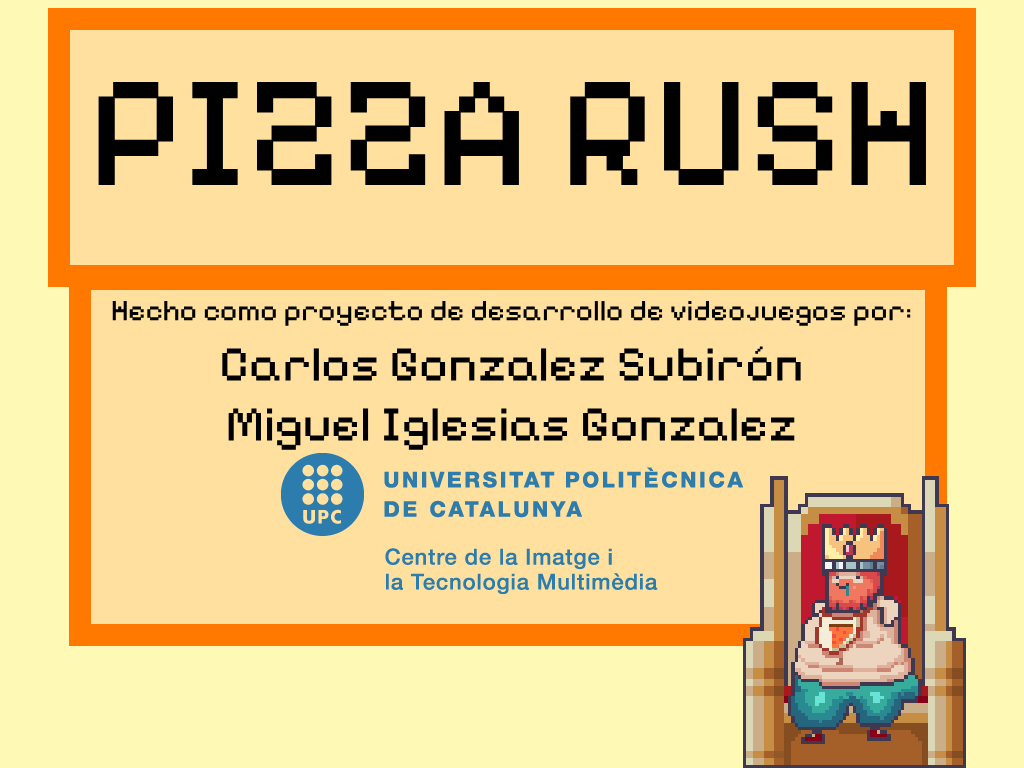
<style>
.page{position:relative;width:1024px;height:768px;background:#ffe09e}
.page>*{position:absolute;margin:0}
.t1{font:160px "PixelifySans-Regular";color:#000000}
.t2{font:30px "PixelifySans-Regular";color:#000000}
.t3{font:50px "PixelifySans-Regular";color:#000000}
</style>
<div class="page">
<p class="t1" style="left:98px;top:82px;width:828px;height:103px">PIZZA RUSH</p>
<p class="t2" style="left:112px;top:301px;width:799px;height:149px;text-align:center">Hecho como proyecto de desarrollo de videojuegos por:<br><span class="t3">Carlos Gonzalez Subirón<br>Miguel Iglesias Gonzalez</span></p>
</div>
